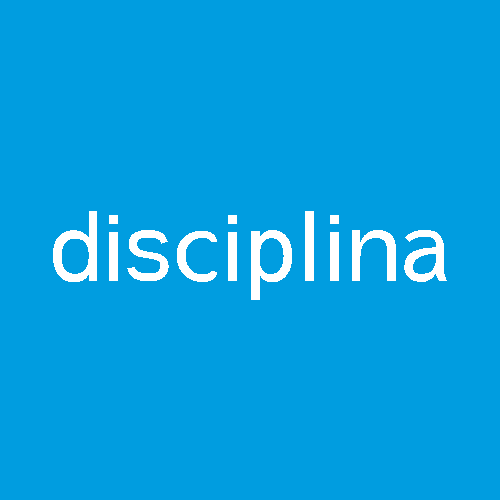
<style>
.page{position:relative;width:500px;height:500px;background:#009de0}
.page>*{position:absolute;margin:0}
.t1{font:95px "SawarabiGothic-Regular";color:#ffffff}
</style>
<div class="page">
<p class="t1" style="left:53px;top:211px;width:394px;height:89px">disciplina</p>
</div>
